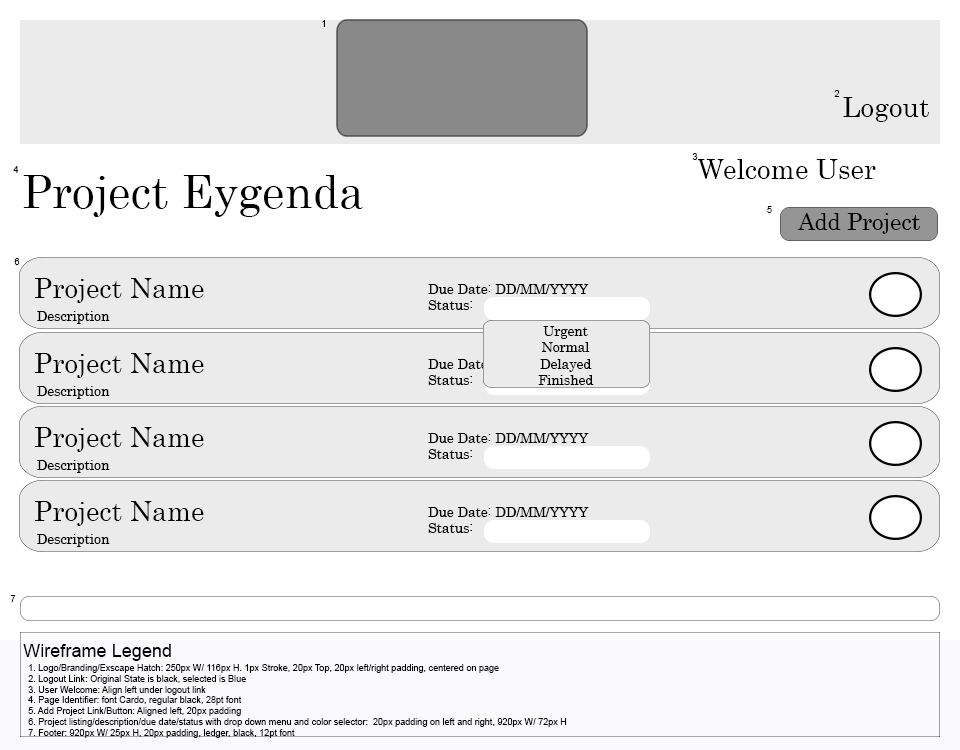
<style>
.page{position:relative;width:960px;height:750px;background:#ebebeb}
.page>*{position:absolute;margin:0}
.t1{font:9.1px "ArialMT";color:#000000}
.t2{font:27.2px "Century";color:#000000}
.t3{font:45.3px "Century";color:#000000}
.t4{font:22.6px "Century";color:#000000}
.t5{font:13.6px "Century";color:#000000}
.t6{font:13.6px "Century"}
.t7{font:18.1px "ArialMT";color:#000000}
</style>
<div class="page">
<p class="t1" style="left:322px;top:20px;width:3px;height:7px">1</p>
<p class="t1" style="left:834px;top:90px;width:6px;height:7px">2</p>
<p class="t2" style="left:843px;top:97px;width:86px;height:25px">Logout</p>
<p class="t1" style="left:692px;top:153px;width:6px;height:7px">3</p>
<p class="t2" style="left:698px;top:159px;width:178px;height:20px">Welcome User</p>
<p class="t1" style="left:13px;top:166px;width:6px;height:7px">4</p>
<p class="t3" style="left:23px;top:175px;width:340px;height:42px">Project Eygenda</p>
<p class="t1" style="left:767px;top:206px;width:5px;height:7px">5</p>
<p class="t4" style="left:798px;top:213px;width:122px;height:21px">Add Project</p>
<p class="t1" style="left:14px;top:258px;width:6px;height:7px">6</p>
<p class="t2" style="left:35px;top:278px;width:169px;height:25px">Project Name</p>
<p class="t5" style="left:428px;top:284px;width:161px;height:26px">Due Date: DD/MM/YYYY<br>Status:</p>
<p class="t5" style="left:37px;top:311px;width:73px;height:13px">Description</p>
<p class="t5" style="left:538px;top:326px;width:56px;height:59px;text-align:center">Urgent<br>Normal<br>Delayed<br>Finished</p>
<p class="t2" style="left:35px;top:353px;width:169px;height:25px">Project Name</p>
<p class="t6" style="left:428px;top:359px;width:161px;height:26px">Due Date: DD/MM/YYYY<br>Status:</p>
<p class="t5" style="left:37px;top:386px;width:73px;height:13px">Description</p>
<p class="t2" style="left:35px;top:427px;width:169px;height:25px">Project Name</p>
<p class="t5" style="left:428px;top:433px;width:161px;height:26px">Due Date: DD/MM/YYYY<br>Status:</p>
<p class="t5" style="left:37px;top:460px;width:73px;height:13px">Description</p>
<p class="t2" style="left:35px;top:501px;width:169px;height:25px">Project Name</p>
<p class="t5" style="left:428px;top:507px;width:161px;height:26px">Due Date: DD/MM/YYYY<br>Status:</p>
<p class="t5" style="left:37px;top:534px;width:73px;height:13px">Description</p>
<p class="t1" style="left:10px;top:595px;width:6px;height:7px">7</p>
<p class="t7" style="left:23px;top:644px;width:148px;height:17px">Wireframe Legend</p>
<p class="t1" style="left:28px;top:664px;width:539px;height:74px">1. Logo/Branding/Exscape Hatch: 250px W/ 116px H. 1px Stroke, 20px Top, 20px left/right padding, centered on page<br>2. Logout Link: Original State is black, selected is Blue<br>3. User Welcome: Align left under logout link<br>4. Page Identifier: font Cardo, regular black, 28pt font<br>5. Add Project Link/Button: Aligned left, 20px padding<br>6. Project listing/description/due date/status with drop down menu and color selector:  20px padding on left and right, 920px W/ 72px H<br>7. Footer: 920px W/ 25px H, 20px padding, ledger, black, 12pt font</p>
</div>
